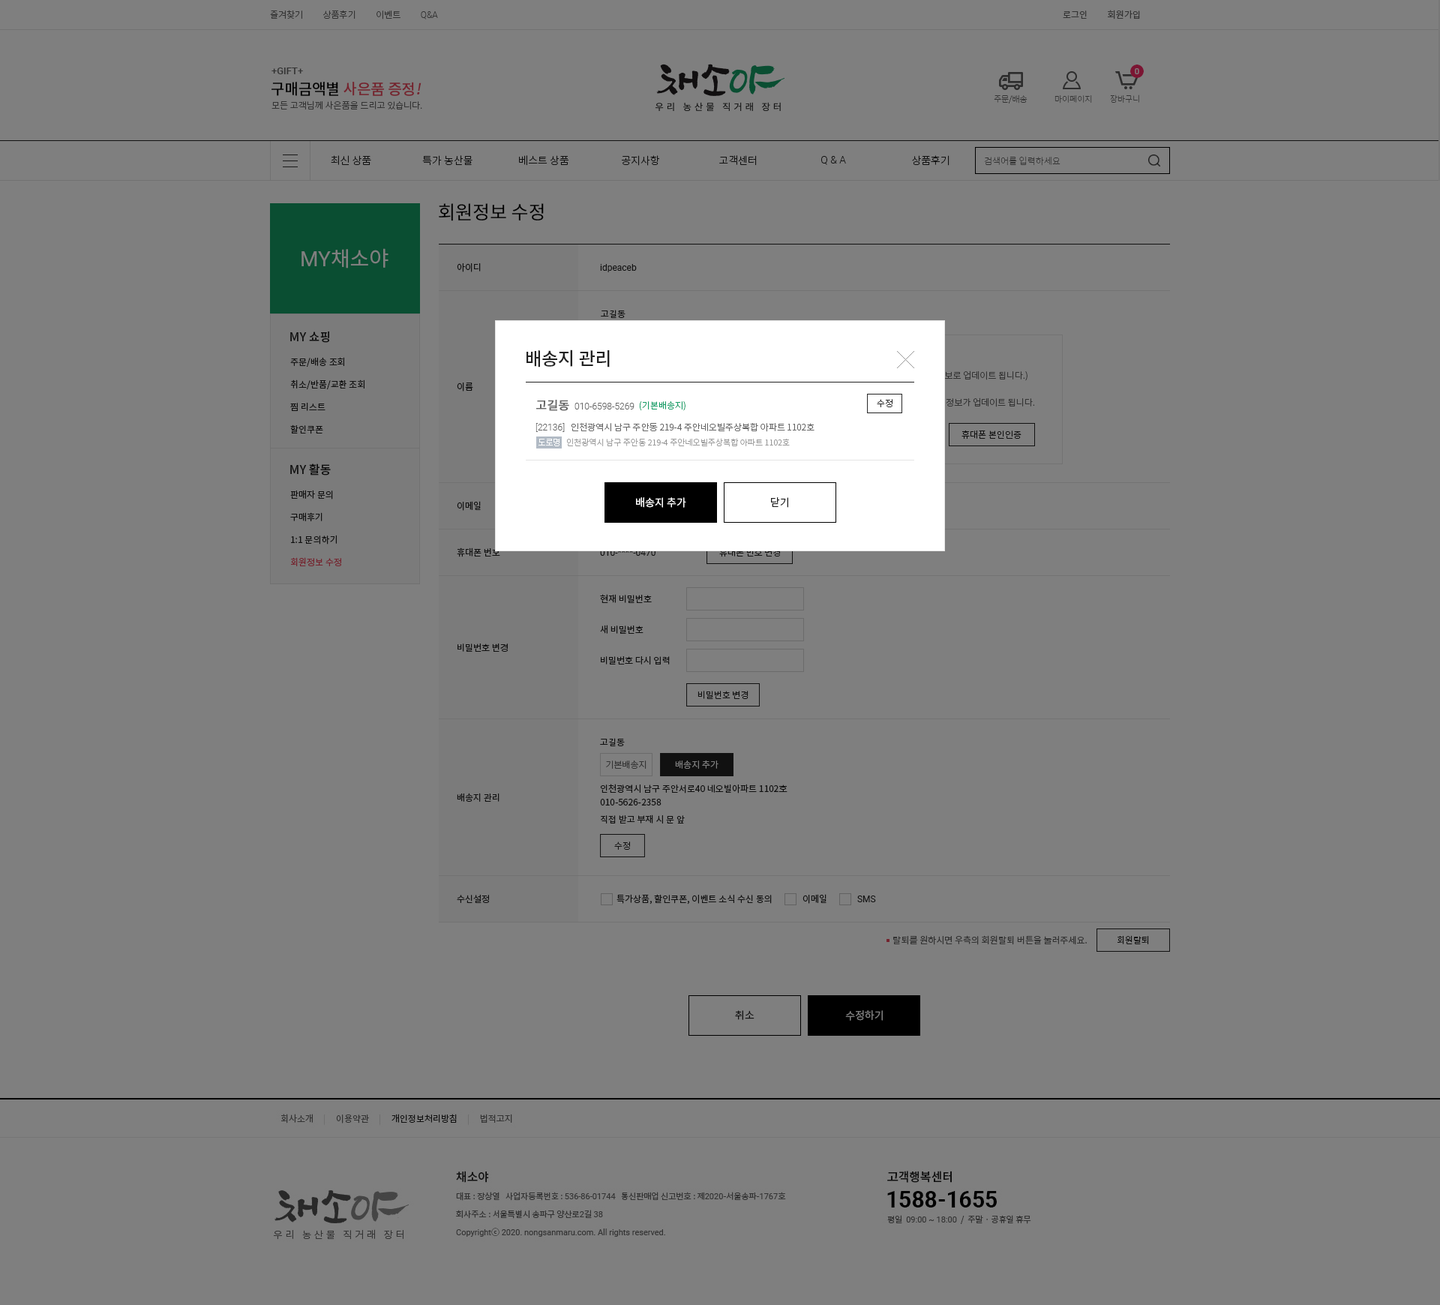
<style>
.page{position:relative;width:1440px;height:1305px;background:#7f7f7f}
.page>*{position:absolute;margin:0}
.t1{font:9px "NotoSansCJKkr-Light";color:#333333}
.t2{font:9px "Roboto-Light";color:#333333}
.t3{font:9px "NotoSansCJKkr-DemiLight";color:#333333}
.t4{font:9.8px "Roboto-Medium";color:#333333}
.t5{font:15px "NotoSansCJKkr-Medium"}
.t6{font:15px "NotoSansCJKkr-Medium";font-style:italic}
.t7{font:8.2px "NotoSansCJKkr-Thin";color:#333333}
.t8{font:10.5px "NotoSansCJKkr-Light";color:#222222}
.t9{font:10.5px "Roboto-Light";color:#222222}
.t10{font:9px "NotoSansCJKkr-Thin";color:#333333}
.t11{font:18.8px "NotoSansCJKkr-Regular";color:#000000}
.t12{font:21px "NotoSansCJKkr-Regular";color:#7f7f7f}
.t13{font:21px "Roboto-Regular";color:#7f7f7f}
.t14{font:9px "NotoSansCJKkr-Regular";color:#222222}
.t15{font:9px "Roboto-Regular";color:#222222}
.t16{font:12px "NotoSansCJKkr-Medium";color:#222222}
.t17{font:18px "NotoSansCJKkr-Medium";color:#222222}
.t18{font:9px/22.5px "NotoSansCJKkr-Regular";color:#222222}
.t19{font:12px "NotoSansCJKkr-Regular";color:#666666;font-weight:bold}
.t20{font:9px "NotoSansCJKkr-Light";color:#159c65}
.t21{font:9px "NotoSansCJKkr-Light";color:#222222}
.t22{font:9px "Roboto-Light";color:#666666}
.t23{font:9px "NotoSansCJKkr-Light";color:#666666}
.t24{font:8.2px "NotoSansCJKkr-Light";color:#999999}
.t25{font:9px/22.5px "NotoSansCJKkr-Regular";color:#ea475c}
.t26{font:10.5px "NotoSansCJKkr-DemiLight";color:#ffffff}
.t27{font:10.5px "NotoSansCJKkr-DemiLight";color:#222222}
.t28{font:9px "NotoSansCJKkr-Light";color:#7f7f7f}
.t29{font:9px/13.5px "NotoSansCJKkr-Regular";color:#222222}
.t30{font:9px "NotoSansCJKkr-Regular";color:#333333}
.t31{font:10.5px "NotoSansCJKkr-DemiLight";color:#7f7f7f}
</style>
<div class="page">
<p class="t1" style="left:270px;top:10px;width:168px;height:10px">즐겨찾기          상품후기          이벤트          <span class="t2">Q&amp;A</span></p>
<p class="t3" style="left:1063px;top:10px;width:77px;height:10px">로그인          회원가입</p>
<p class="t4" style="left:272px;top:68px;width:31px;height:6px">+GIFT+</p>
<p class="t5" style="left:272px;top:82px;width:150px;height:14px">구매금액별 사은품 증정<span class="t6">!</span></p>
<p class="t1" style="left:272px;top:100px;width:150px;height:10px">모든 고객님께 사은품을 드리고 있습니다.</p>
<p class="t7" style="left:994px;top:94px;width:34px;height:10px">주문/배송</p>
<p class="t7" style="left:1054px;top:95px;width:38px;height:9px">마이페이지</p>
<p class="t7" style="left:1110px;top:94px;width:29px;height:10px">장바구니</p>
<p class="t8" style="left:331px;top:155px;width:40px;height:10px">최신 상품</p>
<p class="t8" style="left:422px;top:155px;width:50px;height:11px">특가 농산물</p>
<p class="t8" style="left:519px;top:155px;width:50px;height:11px">베스트 상품</p>
<p class="t8" style="left:622px;top:155px;width:38px;height:11px">공지사항</p>
<p class="t8" style="left:719px;top:155px;width:38px;height:11px">고객센터</p>
<p class="t9" style="left:821px;top:156px;width:25px;height:9px">Q &amp; A</p>
<p class="t8" style="left:912px;top:155px;width:38px;height:11px">상품후기</p>
<p class="t10" style="left:984px;top:156px;width:76px;height:10px">검색어를 입력하세요</p>
<p class="t11" style="left:439px;top:203px;width:105px;height:18px">회원정보 수정</p>
<p class="t12" style="left:302px;top:248px;width:86px;height:20px"><span class="t13">MY</span>채소야</p>
<p class="t14" style="left:457px;top:263px;width:24px;height:9px">아이디</p>
<p class="t15" style="left:600px;top:264px;width:37px;height:8px">idpeaceb</p>
<p class="t14" style="left:601px;top:310px;width:25px;height:8px">고길동</p>
<p class="t16" style="left:290px;top:331px;width:39px;height:12px">MY 쇼핑</p>
<p class="t17" style="left:526px;top:350px;width:84px;height:18px">배송지 관리</p>
<p class="t18" style="left:290px;top:357px;width:74px;height:77px">주문/배송 조회<br>취소/반품/교환 조회<br>찜 리스트<br>할인쿠폰</p>
<p class="t14" style="left:457px;top:382px;width:16px;height:10px">이름</p>
<p class="t19" style="left:536px;top:400px;width:33px;height:11px">고길동</p>
<p class="t20" style="left:639px;top:401px;width:47px;height:10px">(기본배송지)</p>
<p class="t21" style="left:877px;top:399px;width:15px;height:8px">수정</p>
<p class="t22" style="left:574px;top:403px;width:60px;height:7px">010-6598-5269</p>
<p class="t23" style="left:536px;top:422px;width:278px;height:10px"><span class="t22">[22136]</span>   인천광역시 남구 주안동 219-4 주안네오빌주상복합 아파트 1102호</p>
<p class="t24" style="left:566px;top:438px;width:224px;height:9px">인천광역시 남구 주안동 219-4 주안네오빌주상복합 아파트 1102호</p>
<p class="t21" style="left:962px;top:430px;width:60px;height:10px">휴대폰 본인인증</p>
<p class="t16" style="left:290px;top:464px;width:41px;height:12px">MY 활동</p>
<p class="t18" style="left:290px;top:490px;width:51px;height:76px">판매자 문의<br>구매후기<br>1:1 문의하기<br><span class="t25">회원정보 수정</span></p>
<p class="t26" style="left:636px;top:497px;width:50px;height:11px">배송지 추가</p>
<p class="t27" style="left:771px;top:497px;width:17px;height:11px">닫기</p>
<p class="t14" style="left:457px;top:501px;width:24px;height:10px">이메일</p>
<p class="t14" style="left:457px;top:548px;width:43px;height:9px">휴대폰 번호</p>
<p class="t14" style="left:600px;top:594px;width:52px;height:9px">현재 비밀번호</p>
<p class="t14" style="left:600px;top:625px;width:44px;height:9px">새 비밀번호</p>
<p class="t14" style="left:458px;top:644px;width:50px;height:8px">비밀번호 변경</p>
<p class="t14" style="left:601px;top:656px;width:69px;height:8px">비밀번호 다시 입력</p>
<p class="t21" style="left:698px;top:691px;width:50px;height:8px">비밀번호 변경</p>
<p class="t14" style="left:600px;top:738px;width:25px;height:8px">고길동</p>
<p class="t1" style="left:606px;top:760px;width:40px;height:9px">기본배송지</p>
<p class="t28" style="left:675px;top:760px;width:43px;height:9px">배송지 추가</p>
<p class="t29" style="left:600px;top:784px;width:188px;height:22px">인천광역시 남구 주안서로40 네오빌아파트 1102호<br>010-5626-2358</p>
<p class="t14" style="left:457px;top:793px;width:43px;height:9px">배송지 관리</p>
<p class="t14" style="left:601px;top:814px;width:84px;height:10px">직접 받고 부재 시 문 앞</p>
<p class="t21" style="left:614px;top:842px;width:16px;height:8px">수정</p>
<p class="t14" style="left:616px;top:894px;width:156px;height:10px">특가상품, 할인쿠폰, 이벤트 소식 수신 동의</p>
<p class="t14" style="left:802px;top:894px;width:24px;height:10px">이메일</p>
<p class="t14" style="left:457px;top:895px;width:32px;height:8px">수신설정</p>
<p class="t15" style="left:857px;top:896px;width:19px;height:6px">SMS</p>
<p class="t30" style="left:893px;top:935px;width:194px;height:10px">탈퇴를 원하시면 우측의 회원탈퇴 버튼을 눌러주세요.</p>
<p class="t21" style="left:1118px;top:935px;width:31px;height:9px">회원탈퇴</p>
<p class="t27" style="left:735px;top:1010px;width:19px;height:10px">취소</p>
<p class="t31" style="left:845px;top:1010px;width:38px;height:11px">수정하기</p>
</div>
